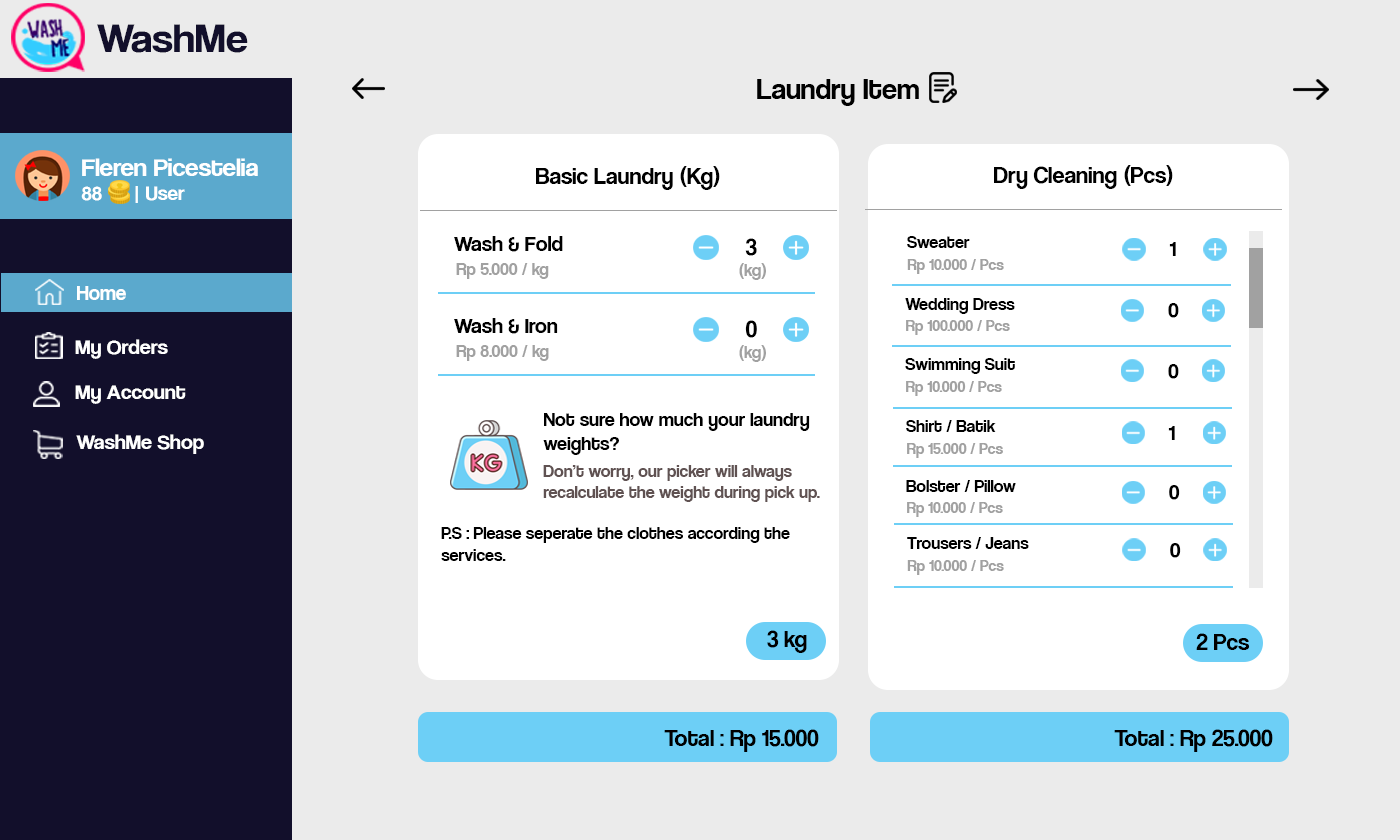
<style>
.page{position:relative;width:1400px;height:840px;background:#ebebeb}
.page>*{position:absolute;margin:0}
.t1{font:42.1px "CoolveticaRg-Regular";color:#120f2b;scale:1.05 1}
.t2{font:30px "CoolveticaRg-Regular";color:#000000}
.t3{font:25.2px "CoolveticaRg-Regular";color:#ffffff;scale:1.05 1}
.t4{font:20px "CoolveticaRg-Regular";color:#ffffff;scale:1.05 1}
.t5{font:24px "CoolveticaRg-Regular";color:#000000}
.t6{font:22px "CoolveticaRg-Regular";color:#000000}
.t7{font:18.3px "CoolveticaRg-Regular";color:#000000}
.t8{font:21.9px "CoolveticaRg-Regular";color:#000000}
.t9{font:18px "CoolveticaRg-Regular";color:#a1a1a1}
.t10{font:16.5px "CoolveticaRg-Regular";color:#a1a1a1}
.t11{font:21px "CoolveticaRg-Regular";color:#ffffff}
.t12{font:21px "CoolveticaRg-Regular";color:#ffffff;scale:1.05 1}
.t13{font:20px "CoolveticaRg-Regular";color:#000000}
.t14{font:18px "CoolveticaRg-Regular";color:#605252}
.t15{font:18px "CoolveticaRg-Regular";color:#000000}
</style>
<div class="page">
<p class="t1" style="left:97px;top:24px;width:151px;height:29px">WashMe</p>
<p class="t2" style="left:757px;top:79px;width:162px;height:27px">Laundry Item</p>
<p class="t3" style="left:81px;top:158px;width:177px;height:45px">Fleren Picestelia<br><span class="t4">88      | User</span></p>
<p class="t5" style="left:536px;top:166px;width:184px;height:24px">Basic Laundry (Kg)</p>
<p class="t5" style="left:994px;top:165px;width:179px;height:24px">Dry Cleaning (Pcs)</p>
<p class="t6" style="left:454px;top:236px;width:109px;height:16px">Wash &amp; Fold</p>
<p class="t5" style="left:745px;top:238px;width:12px;height:18px">3</p>
<p class="t7" style="left:907px;top:236px;width:63px;height:12px">Sweater</p>
<p class="t8" style="left:1169px;top:242px;width:7px;height:14px">1</p>
<p class="t9" style="left:456px;top:263px;width:93px;height:16px">Rp 5.000 / kg</p>
<p class="t9" style="left:739px;top:263px;width:27px;height:17px">(kg)</p>
<p class="t10" style="left:907px;top:259px;width:97px;height:15px">Rp 10.000 / Pcs</p>
<p class="t11" style="left:77px;top:286px;width:49px;height:14px">Home</p>
<p class="t7" style="left:905px;top:298px;width:110px;height:16px">Wedding Dress</p>
<p class="t8" style="left:1168px;top:303px;width:11px;height:15px">0</p>
<p class="t6" style="left:454px;top:318px;width:104px;height:16px">Wash &amp; Iron</p>
<p class="t5" style="left:745px;top:320px;width:12px;height:18px">0</p>
<p class="t10" style="left:906px;top:320px;width:104px;height:15px">Rp 100.000 / Pcs</p>
<p class="t12" style="left:75px;top:339px;width:93px;height:20px">My Orders</p>
<p class="t9" style="left:456px;top:345px;width:93px;height:16px">Rp 8.000 / kg</p>
<p class="t9" style="left:739px;top:345px;width:27px;height:17px">(kg)</p>
<p class="t7" style="left:905px;top:358px;width:110px;height:16px">Swimming Suit</p>
<p class="t8" style="left:1168px;top:364px;width:11px;height:15px">0</p>
<p class="t12" style="left:75px;top:385px;width:111px;height:19px">My Account</p>
<p class="t10" style="left:906px;top:381px;width:96px;height:15px">Rp 10.000 / Pcs</p>
<p class="t13" style="left:543px;top:413px;width:267px;height:42px">Not sure how much your laundry <br>weights?</p>
<p class="t7" style="left:906px;top:420px;width:90px;height:12px">Shirt / Batik</p>
<p class="t12" style="left:76px;top:434px;width:128px;height:20px">WashMe Shop</p>
<p class="t8" style="left:1168px;top:426px;width:7px;height:14px">1</p>
<p class="t10" style="left:907px;top:443px;width:96px;height:15px">Rp 15.000 / Pcs</p>
<p class="t14" style="left:543px;top:465px;width:277px;height:37px">Don’t worry, our picker will always <br>recalculate the weight during pick up.</p>
<p class="t7" style="left:906px;top:480px;width:110px;height:12px">Bolster / Pillow</p>
<p class="t8" style="left:1169px;top:485px;width:11px;height:15px">0</p>
<p class="t10" style="left:907px;top:502px;width:96px;height:15px">Rp 10.000 / Pcs</p>
<p class="t15" style="left:441px;top:527px;width:349px;height:34px">P.S : Please seperate the clothes according the <br>services.</p>
<p class="t7" style="left:907px;top:537px;width:122px;height:12px">Trousers / Jeans</p>
<p class="t8" style="left:1170px;top:543px;width:11px;height:15px">0</p>
<p class="t10" style="left:907px;top:560px;width:97px;height:15px">Rp 10.000 / Pcs</p>
<p class="t5" style="left:767px;top:630px;width:40px;height:23px">3 kg</p>
<p class="t5" style="left:1196px;top:633px;width:54px;height:17px">2 Pcs</p>
<p class="t5" style="left:664px;top:729px;width:155px;height:23px">Total : Rp 15.000</p>
<p class="t5" style="left:1114px;top:729px;width:159px;height:23px">Total : Rp 25.000</p>
</div>
